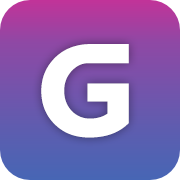
<style>
.page{position:relative;width:180px;height:180px}
.page>*{position:absolute;margin:0}
.t1{font:128px "BABAPROFONT-Bold";color:#ffffff}
</style>
<div class="page">
<p class="t1" style="left:41px;top:44px;width:88px;height:94px">G</p>
</div>
